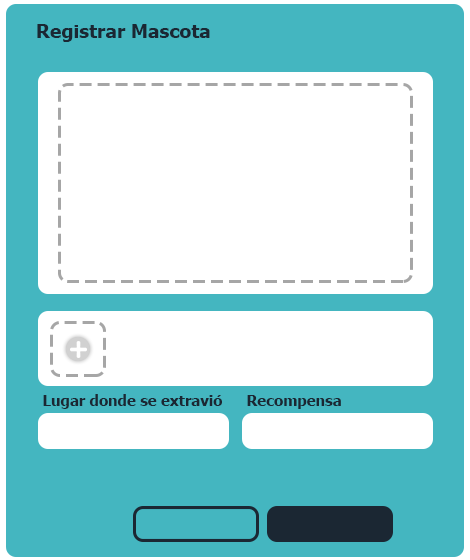
<style>
.page{position:relative;width:470px;height:560px;background:#ffffff}
.page>*{position:absolute;margin:0}
.t1{font:19.2px "Tahoma-Bold";color:#1b2733}
.t2{font:14.8px "Tahoma-Bold";color:#1b2733}
</style>
<div class="page">
<p class="t1" style="left:37px;top:24px;width:173px;height:18px">Registrar Mascota</p>
<p class="t2" style="left:43px;top:394px;width:179px;height:15px">Lugar donde se extravió</p>
<p class="t2" style="left:247px;top:395px;width:94px;height:14px">Recompensa</p>
</div>
